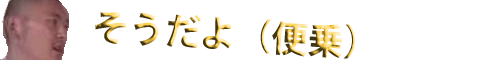
<style>
.page{position:relative;width:480px;height:60px;background:#ffffff}
.page>*{position:absolute;margin:0}
.t1{font:36px "KozGoPro-Bold"}
</style>
<div class="page">
<p class="t1" style="left:95px;top:12px;width:260px;height:47px;rotate:4deg">そうだよ（便乗）</p>
</div>
